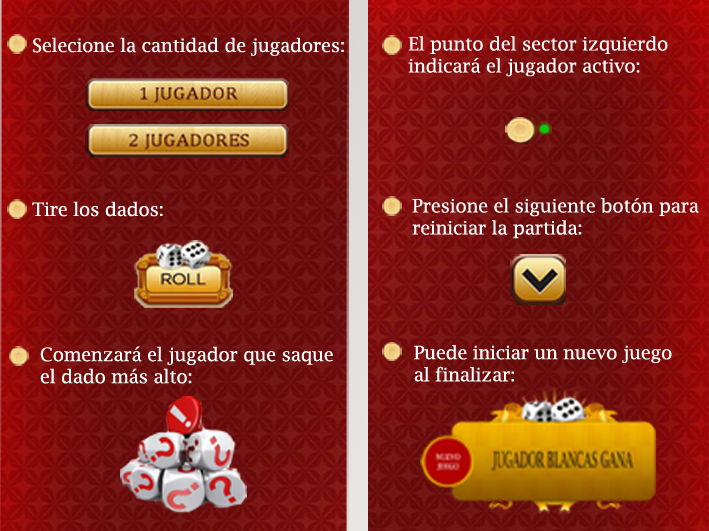
<style>
.page{position:relative;width:709px;height:531px}
.page>*{position:absolute;margin:0}
.t1{font:18.4px "LucidaBright";color:#ffffff}
</style>
<div class="page">
<p class="t1" style="left:33px;top:37px;width:311px;height:19px">Selecione la cantidad de jugadores:</p>
<p class="t1" style="left:408px;top:36px;width:260px;height:41px">El punto del sector izquierdo<br>indicará el jugador activo:</p>
<p class="t1" style="left:412px;top:198px;width:287px;height:41px">Presione el siguiente botón para<br>reiniciar la partida:</p>
<p class="t1" style="left:32px;top:201px;width:131px;height:16px">Tire los dados:</p>
<p class="t1" style="left:40px;top:346px;width:293px;height:38px">Comenzará el jugador que saque <br>el dado más alto:</p>
<p class="t1" style="left:414px;top:345px;width:258px;height:37px">Puede iniciar un nuevo juego<br>al finalizar:</p>
</div>
